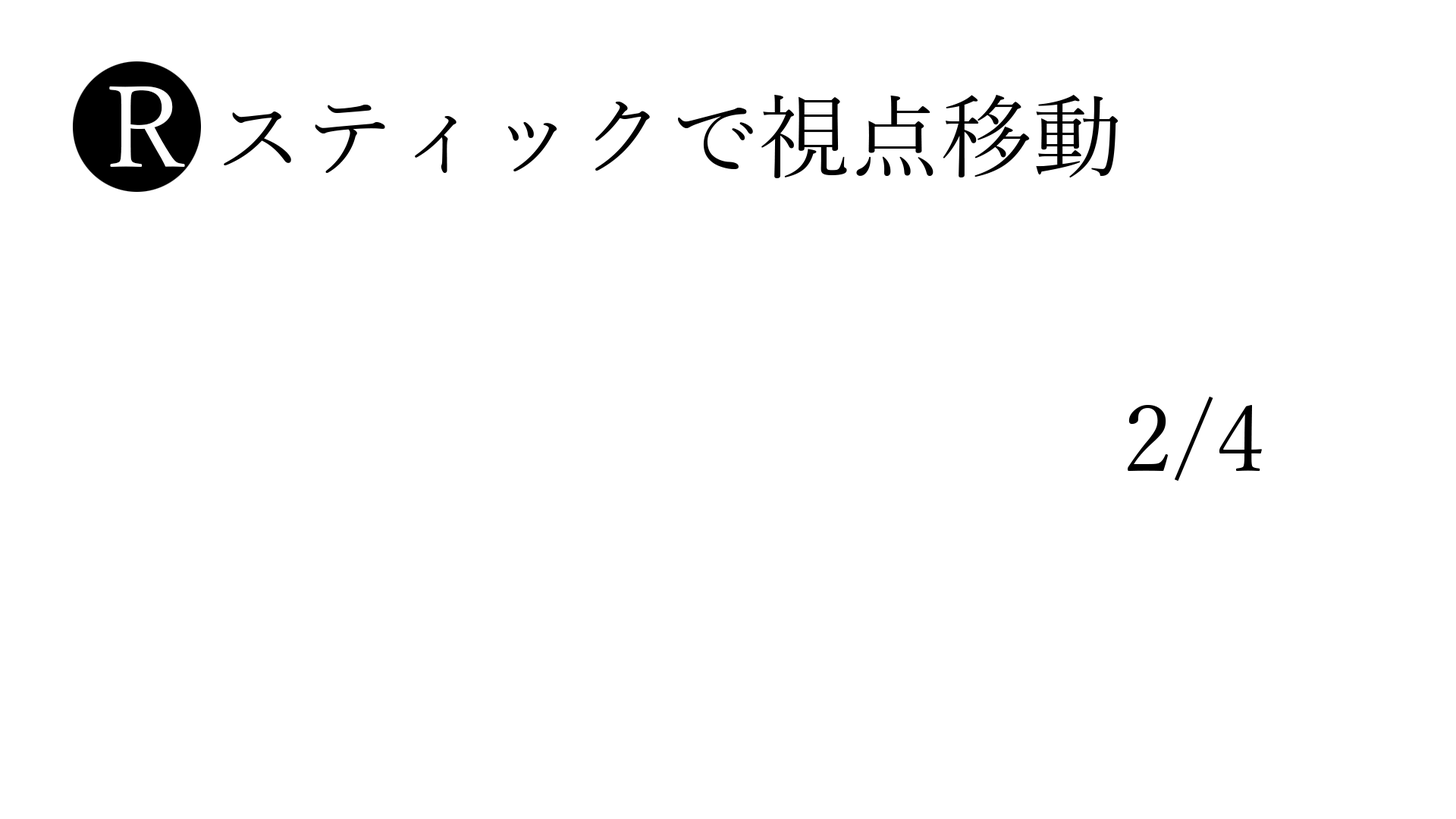
<style>
.page{position:relative;width:1456px;height:819px;background:#ffffff}
.page>*{position:absolute;margin:0}
.t1{font:91px "YuMincho-Regular";color:#000000}
.t2{font:113.7px "YuMincho-Regular";color:#ffffff}
</style>
<div class="page">
<p class="t1" style="left:109px;top:86px;width:1010px;height:92px"><span class="t2">R </span>スティックで視点移動</p>
<p class="t1" style="left:1128px;top:397px;width:134px;height:84px">2/4</p>
</div>
